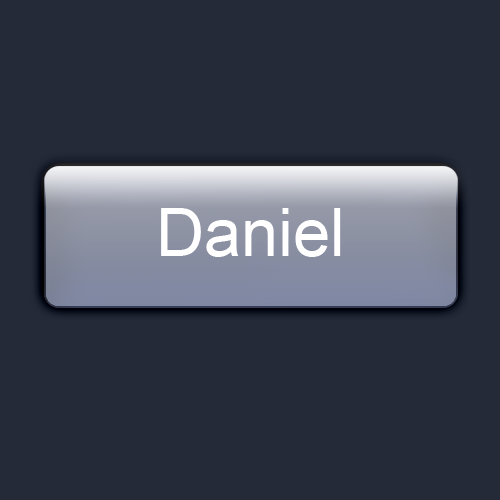
<style>
.page{position:relative;width:500px;height:500px;background:#252a38}
.page>*{position:absolute;margin:0}
.t1{font:66.7px "ArialMT";color:#ffffff}
</style>
<div class="page">
<p class="t1" style="left:161px;top:208px;width:180px;height:49px">Daniel</p>
</div>
